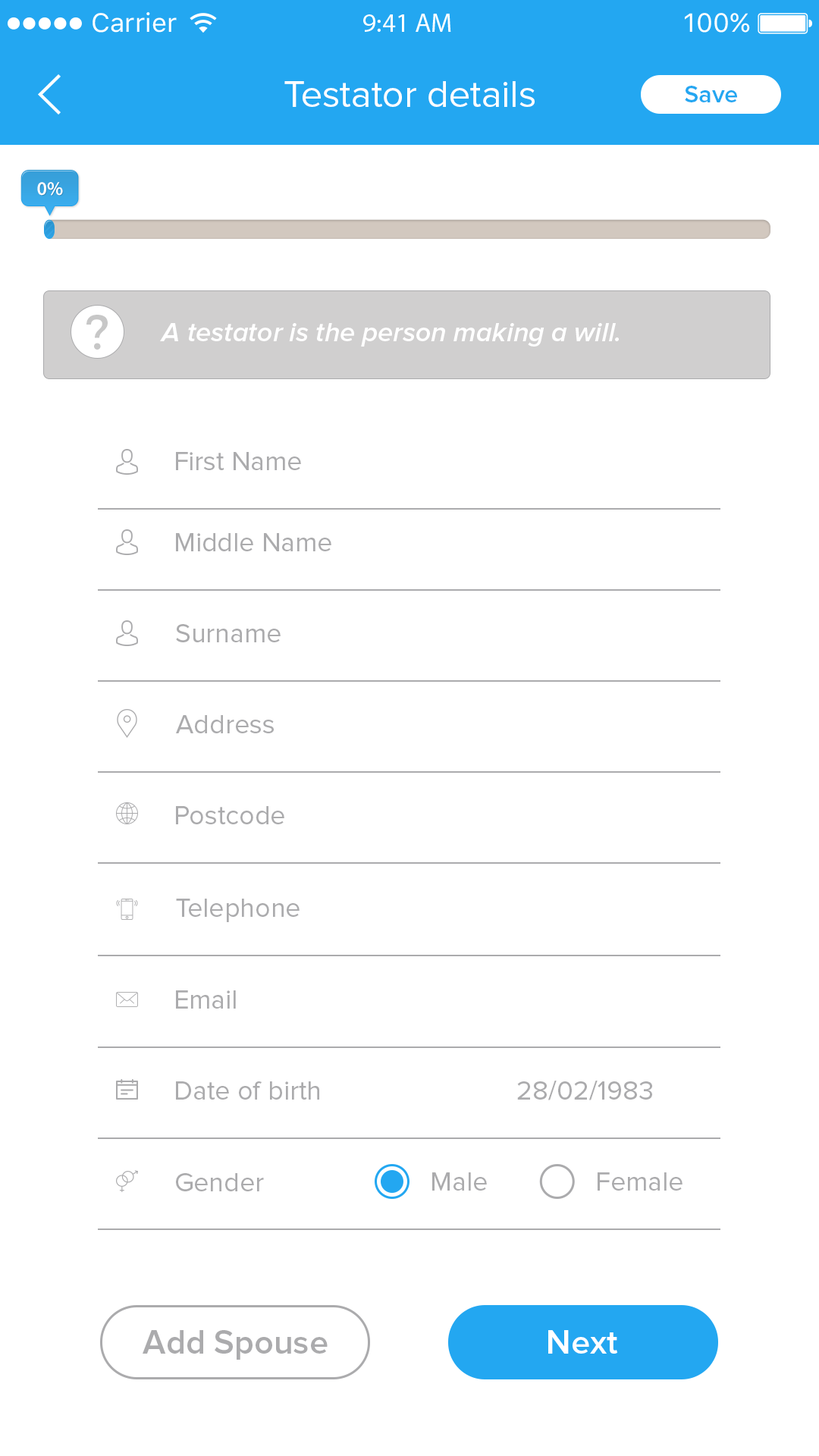
<style>
.page{position:relative;width:819px;height:1456px;background:#ffffff}
.page>*{position:absolute;margin:0}
.t1{font:38.1px "ProximaNova-Regular";color:#ffffff}
.t2{font:24.7px "ProximaNova-Semibold";color:#23a7f1}
.t3{font:19.2px "MyriadPro-Semibold";color:#ffffff}
.t4{font:48.9px "Montserrat-Regular";color:#c7c7c7;scale:1.05 1}
.t5{font:27.2px "ProximaNova-SemiboldIt";color:#ffffff}
.t6{font:27.3px "ProximaNova-Regular";color:#ababad}
.t7{font:34.1px "ProximaNova-Semibold";color:#ababad}
.t8{font:34.1px "ProximaNova-Semibold";color:#ffffff}
</style>
<div class="page">
<p class="t1" style="left:284px;top:81px;width:251px;height:26px">Testator details</p>
<p class="t2" style="left:685px;top:86px;width:52px;height:16px">Save</p>
<p class="t3" style="left:37px;top:182px;width:26px;height:14px">0%</p>
<p class="t4" style="left:86px;top:315px;width:22px;height:35px">?</p>
<p class="t5" style="left:160px;top:323px;width:459px;height:24px">A testator is the person making a will.</p>
<p class="t6" style="left:176px;top:452px;width:125px;height:18px">First Name</p>
<p class="t6" style="left:176px;top:533px;width:155px;height:18px">Middle Name</p>
<p class="t6" style="left:176px;top:624px;width:105px;height:18px">Surname</p>
<p class="t6" style="left:176px;top:715px;width:98px;height:18px">Address</p>
<p class="t6" style="left:176px;top:806px;width:108px;height:18px">Postcode</p>
<p class="t6" style="left:176px;top:899px;width:124px;height:23px">Telephone</p>
<p class="t6" style="left:176px;top:990px;width:60px;height:19px">Email</p>
<p class="t6" style="left:176px;top:1081px;width:143px;height:19px">Date of birth</p>
<p class="t6" style="left:517px;top:1081px;width:135px;height:19px">28/02/1983</p>
<p class="t6" style="left:176px;top:1173px;width:88px;height:18px">Gender</p>
<p class="t6" style="left:432px;top:1172px;width:55px;height:19px">Male</p>
<p class="t6" style="left:598px;top:1172px;width:84px;height:19px">Female</p>
<p class="t7" style="left:143px;top:1330px;width:185px;height:30px">Add Spouse</p>
<p class="t8" style="left:548px;top:1330px;width:69px;height:24px">Next</p>
</div>
